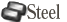
<style>
.page{position:relative;width:67px;height:22px;background:#ffffff}
.page>*{position:absolute;margin:0}
.t1{font:20px "RyuminPro-ExBold";letter-spacing:-0.04em;color:#4c4741;scale:0.8 1}
</style>
<div class="page">
<p class="t1" style="left:27px;top:4px;width:33px;height:15px">Steel</p>
</div>
